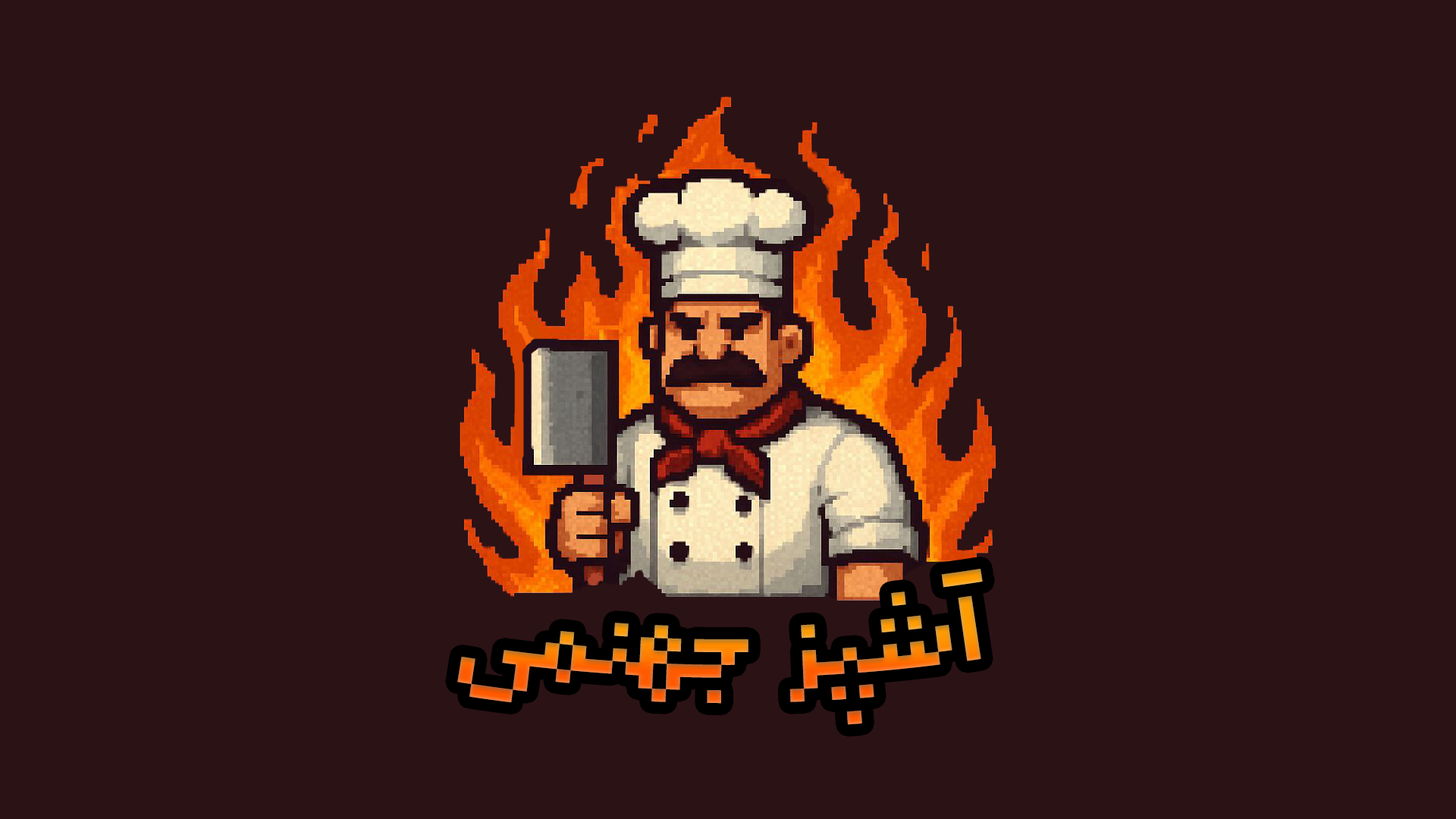
<style>
.page{position:relative;width:1456px;height:819px;background:#2b1215}
.page>*{position:absolute;margin:0}
.t1{font:152.5px "Arapix-Regular"}
</style>
<div class="page">
<p class="t1" style="left:457px;top:569px;width:526px;height:156px">آشپز جهنمی</p>
</div>
